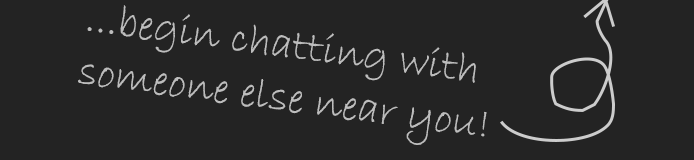
<style>
.page{position:relative;width:694px;height:160px;background:#232323}
.page>*{position:absolute;margin:0}
.t1{font:44px "BradleyHandITC";color:#bdbdbd}
</style>
<div class="page">
<p class="t1" style="left:78px;top:5px;width:409px;height:140px;rotate:8deg">...begin chatting with<br>someone else near you!</p>
</div>
